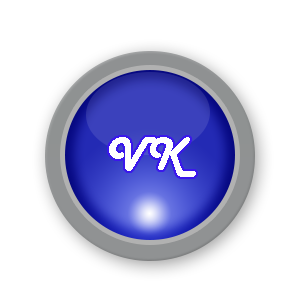
<style>
.page{position:relative;width:300px;height:300px;background:#ffffff}
.page>*{position:absolute;margin:0}
.t1{font:50px "HarlowSolid";color:#ffffff}
</style>
<div class="page">
<p class="t1" style="left:109px;top:137px;width:87px;height:40px">VK</p>
</div>
